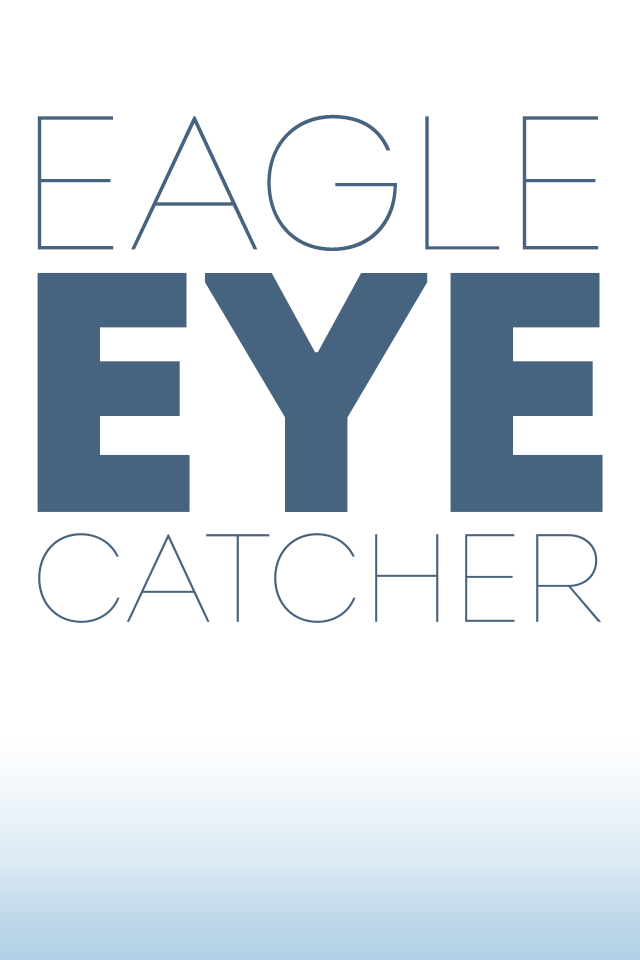
<style>
.page{position:relative;width:640px;height:960px;background:#ffffff}
.page>*{position:absolute;margin:0}
.t1{font:189.9px "Intro-Thin";color:#466480;text-transform:uppercase}
.t2{font:342px "Intro-Black";color:#466480;text-transform:uppercase}
.t3{font:125.3px "Intro-Thin";color:#466480;text-transform:uppercase}
</style>
<div class="page">
<p class="t1" style="left:37px;top:114px;width:562px;height:137px">Eagle</p>
<p class="t2" style="left:37px;top:272px;width:566px;height:240px">eye</p>
<p class="t3" style="left:38px;top:533px;width:563px;height:90px">catcher</p>
</div>
